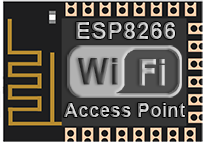
<style>
.page{position:relative;width:203px;height:143px}
.page>*{position:absolute;margin:0}
.t1{font:23.9px "Arial-BoldMT"}
.t2{font:35.9px "Arial-BoldMT";font-weight:bold;scale:0.9 1}
.t3{font:19.3px "Arial-BoldMT"}
</style>
<div class="page">
<p class="t1" style="left:76px;top:22px;width:99px;height:17px">ESP8266</p>
<p class="t2" style="left:78px;top:58px;width:40px;height:27px">Wi</p>
<p class="t2" style="left:139px;top:59px;width:26px;height:27px">Fi</p>
<p class="t3" style="left:63px;top:103px;width:122px;height:14px">Access Point</p>
</div>
